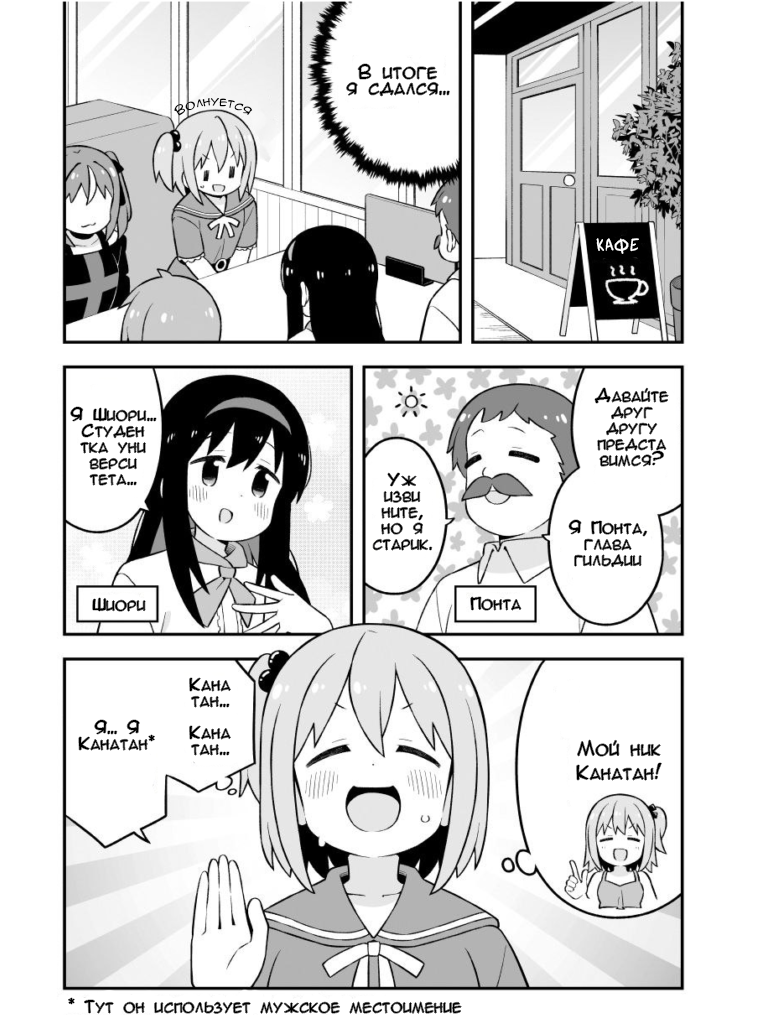
<style>
.page{position:relative;width:768px;height:1024px;background:#ffffff}
.page>*{position:absolute;margin:0}
.t1{font:18px/16px "AnimeAcev3";color:#000000}
.t2{font:12px "AnimeAcev3";color:#000000}
.t3{font:18.1px "SuperWebcomicBros.Rusbyyakustick";color:#ffffff}
.t4{font:16px/16px "AnimeAcev3";color:#000000}
.t5{font:16px "AnimeAcev3";color:#000000}
.t6{font:18px/24px "AnimeAcev3";color:#000000}
</style>
<div class="page">
<p class="t1" style="left:346px;top:64px;width:104px;height:32px;text-align:center">В итоге<br>я сдался...</p>
<p class="t2" style="left:174px;top:98px;width:79px;height:18px">Волнуется</p>
<p class="t3" style="left:596px;top:238px;width:43px;height:16px;rotate:-1deg">КАФe</p>
<p class="t4" style="left:595px;top:388px;width:74px;height:79px;text-align:center">Давайте<br>друг<br>другу<br>предста<br>вимся?</p>
<p class="t4" style="left:70px;top:407px;width:86px;height:79px;text-align:center">Я Шиори...<br>Студен<br>тка уни<br>верси<br>тета...</p>
<p class="t4" style="left:373px;top:473px;width:59px;height:78px;text-align:center">Уж<br>изви<br>ните,<br>но я<br>старик.</p>
<p class="t4" style="left:569px;top:520px;width:78px;height:47px;text-align:center">Я Понта,<br>глава<br>гильдии</p>
<p class="t5" style="left:92px;top:598px;width:54px;height:14px">Шиори</p>
<p class="t5" style="left:470px;top:597px;width:51px;height:14px">Понта</p>
<p class="t4" style="left:189px;top:678px;width:42px;height:78px;text-align:center">Кана<br>тан...<br><br>Кана<br>тан...</p>
<p class="t4" style="left:78px;top:720px;width:77px;height:31px;text-align:center">Я... Я<br>Канатан*</p>
<p class="t6" style="left:576px;top:740px;width:86px;height:41px;text-align:center">Мой ник<br>Канатан!</p>
<p class="t5" style="left:68px;top:998px;width:394px;height:16px">* Тут он использует мужское местоимение</p>
</div>
